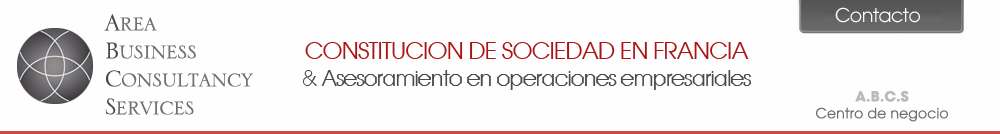
<style>
.page{position:relative;width:1000px;height:134px;background:#fffefe}
.page>*{position:absolute;margin:0}
.t1{font:30px/28px "SerlioLH";letter-spacing:-0.03em;color:#726e71}
.t2{font:30px/28px "SerlioLH";letter-spacing:-0.03em;color:#4b464a}
.t3{font:19px "AvantGarde-Book";letter-spacing:-0.03em;color:#ffffff}
.t4{font:21.4px/27.3px "AvantGarde-Book";letter-spacing:-0.05em;color:#4b4949}
.t5{font:23px/27.3px "AvantGarde-Book";letter-spacing:-0.035em;color:#a91515}
.t6{font:14px "AvantGardeLT-Book";letter-spacing:0.01em;color:#726e71}
.t7{font:14px "AvantGardeLT-Bold";letter-spacing:0.01em;color:#bababa}
</style>
<div class="page">
<p class="t1" style="left:104px;top:14px;width:149px;height:101px"><span class="t2">A</span>rea<br><span class="t2">B</span>usiness<br><span class="t2">C</span>onsultancy<br><span class="t2">S</span>ervices</p>
<p class="t3" style="left:835px;top:7px;width:85px;height:16px">Contacto</p>
<p class="t4" style="left:302px;top:42px;width:450px;height:48px;text-align:center"><span class="t5">CONSTITUCION DE SOCIEDAD EN FRANCIA<br></span>&amp; Asesoramiento en operaciones empresariales</p>
<p class="t6" style="left:816px;top:90px;width:132px;height:32px;text-align:center"><span class="t7">A.B.C.S<br></span>Centro de negocio</p>
</div>
